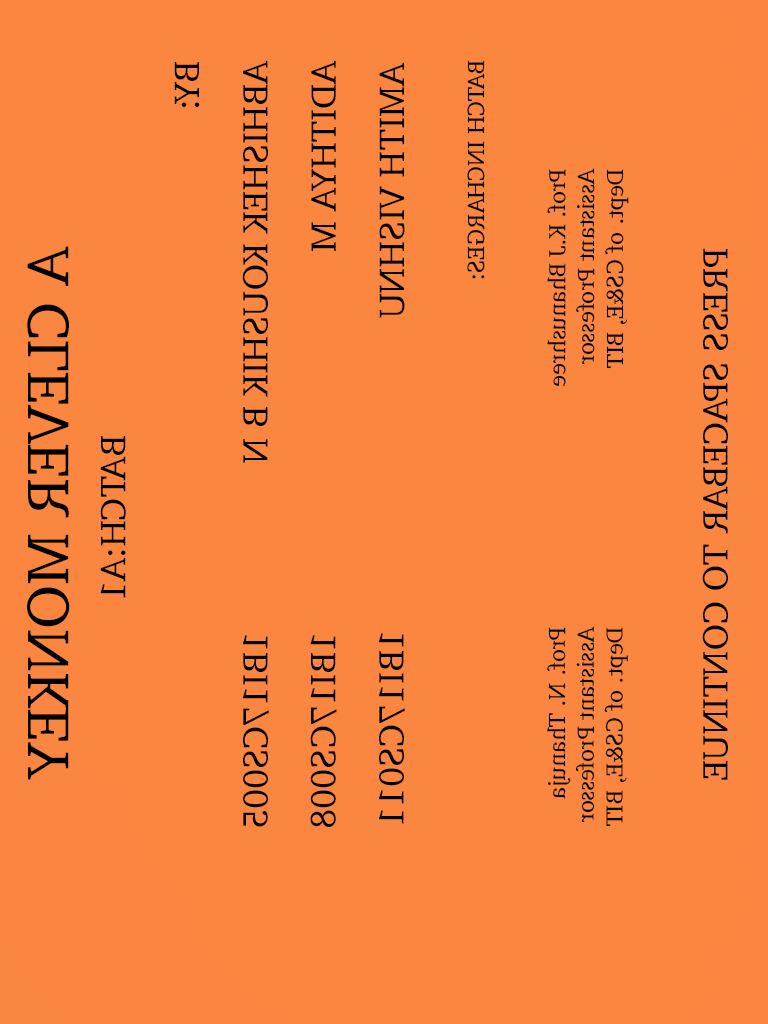
<style>
.page{position:relative;width:768px;height:1024px;background:#fa8640}
.page>*{position:absolute;margin:0}
.t1{font:36px "Charter-Roman";color:#000000}
.t2{font:24px "Charter-Roman";color:#000000}
.t3{font:60px "Charter-Roman";color:#000000}
</style>
<div class="page">
<p class="t1" style="left:174px;top:62px;width:26px;height:45px;rotate:90deg">BY:</p>
<p class="t1" style="left:242px;top:60px;width:26px;height:403px;rotate:90deg">ABHISHEK KOUSHIK B N</p>
<p class="t1" style="left:311px;top:60px;width:25px;height:191px;rotate:90deg">ADITHYA M</p>
<p class="t1" style="left:379px;top:62px;width:26px;height:256px;rotate:90deg">AMITH VISHNU</p>
<p class="t2" style="left:467px;top:60px;width:18px;height:219px;rotate:90deg">BATCH INCHARGES:</p>
<p class="t2" style="left:547px;top:168px;width:82px;height:218px;rotate:90deg">Prof. K.J Bhanushree  <br>Assistant Professor<br>Dept. of CS&amp;E, BIT</p>
<p class="t3" style="left:27px;top:246px;width:43px;height:534px;rotate:90deg">A CLEVER MONKEY</p>
<p class="t1" style="left:702px;top:248px;width:26px;height:532px;rotate:90deg">PRESS SPACEBAR TO CONTINUE</p>
<p class="t1" style="left:100px;top:436px;width:26px;height:162px;rotate:90deg">BATCH:A1</p>
<p class="t2" style="left:547px;top:626px;width:81px;height:201px;rotate:90deg">Prof. N. Thanuja   <br>Assistant Professor<br>Dept. of CS&amp;E, BIT</p>
<p class="t1" style="left:243px;top:635px;width:26px;height:192px;rotate:90deg">1BI17CS005</p>
<p class="t1" style="left:310px;top:635px;width:27px;height:192px;rotate:90deg">1BI17CS008</p>
<p class="t1" style="left:379px;top:633px;width:26px;height:191px;rotate:90deg">1BI17CS011</p>
</div>
